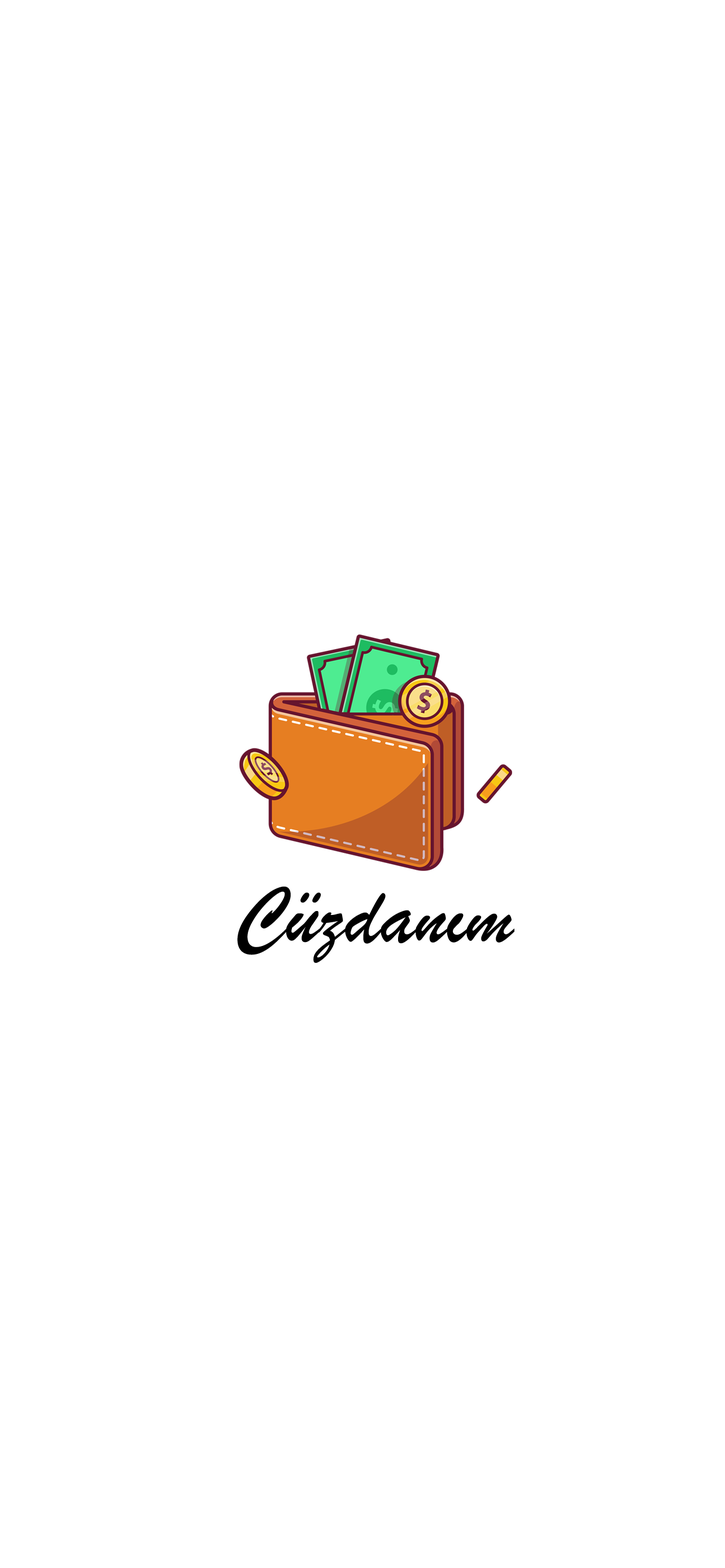
<style>
.page{position:relative;width:725px;height:1568px;background:#ffffff}
.page>*{position:absolute;margin:0}
.t1{font:84.7px "BrushScriptMT";letter-spacing:0.005em;color:#000000}
</style>
<div class="page">
<p class="t1" style="left:237px;top:886px;width:277px;height:77px">Cüzdanım</p>
</div>
